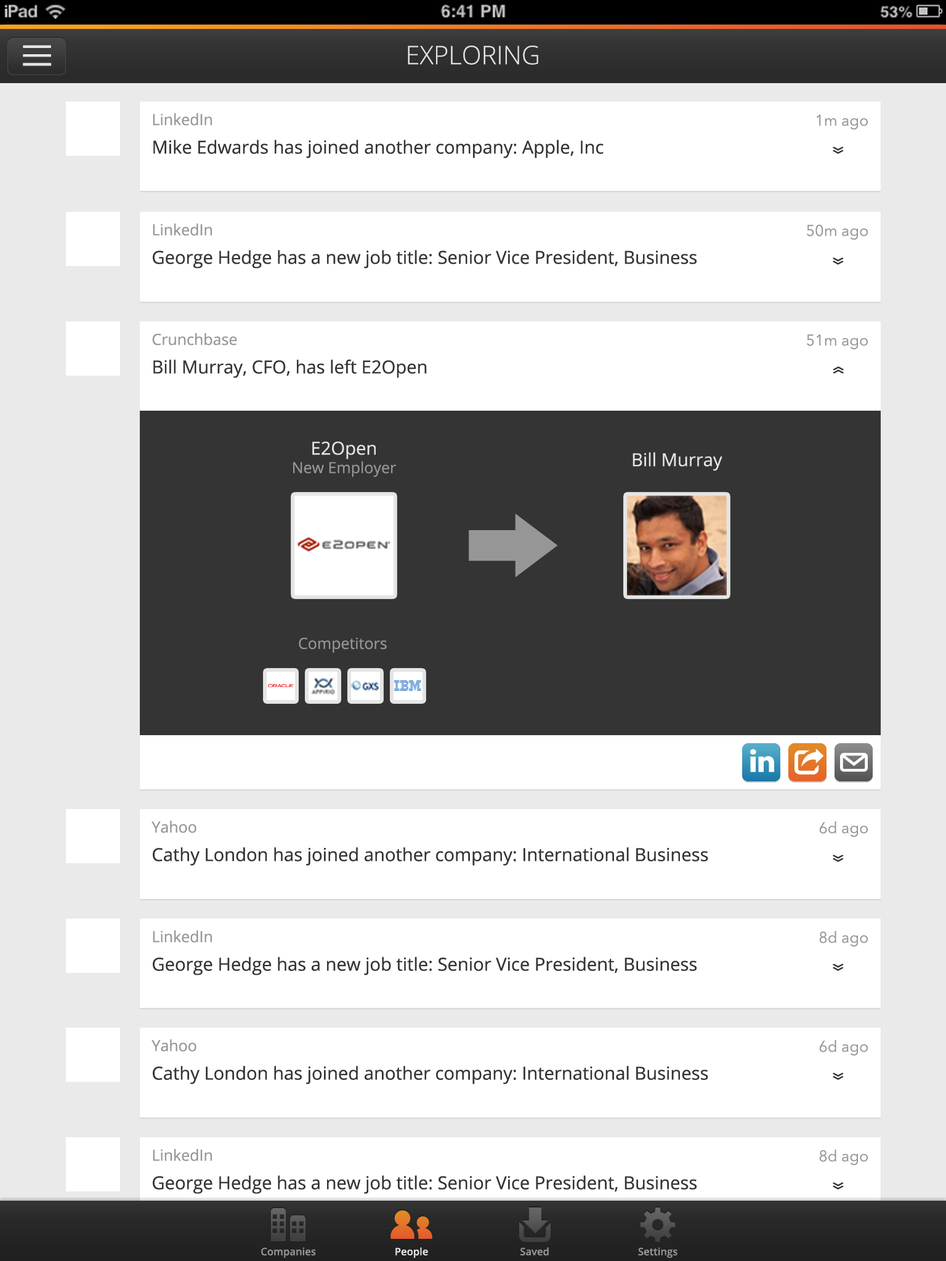
<style>
.page{position:relative;width:946px;height:1261px;background:#ffffff}
.page>*{position:absolute;margin:0}
.t1{font:25.7px "OpenSans-Light";color:#e5e5e5}
.t2{font:18px "OpenSans";color:#343434}
.t3{font:15.4px "OpenSans";color:#969696}
.t4{font:15.4px "AvenirNext-Regular";color:#969696}
.t5{font:25.7px "OpenSans";color:#343434;scale:0.64 1}
.t6{font:18px "OpenSans";color:#e5e5e5}
.t7{font:10.3px "OpenSans-Semibold";color:#969696}
.t8{font:10.3px "OpenSans-Semibold";color:#e5e5e5}
</style>
<div class="page">
<p class="t1" style="left:408px;top:46px;width:130px;height:19px">EXPLORING</p>
<p class="t2" style="left:153px;top:113px;width:450px;height:45px"><span class="t3">LinkedIn<br></span>Mike Edwards has joined another company: Apple, Inc</p>
<p class="t4" style="left:816px;top:115px;width:51px;height:15px">1m ago</p>
<p class="t5" style="left:832px;top:147px;width:11px;height:7px;rotate:90deg">»</p>
<p class="t2" style="left:153px;top:223px;width:543px;height:45px"><span class="t3">LinkedIn<br></span>George Hedge has a new job title: Senior Vice President, Business Development</p>
<p class="t4" style="left:807px;top:224px;width:60px;height:16px">50m ago</p>
<p class="t5" style="left:832px;top:257px;width:11px;height:8px;rotate:90deg">»</p>
<p class="t2" style="left:152px;top:333px;width:275px;height:45px"><span class="t3">Crunchbase<br></span>Bill Murray, CFO, has left E2Open</p>
<p class="t4" style="left:807px;top:334px;width:60px;height:16px">51m ago</p>
<p class="t5" style="left:832px;top:366px;width:11px;height:8px;rotate:-90deg">»</p>
<p class="t3" style="left:293px;top:441px;width:103px;height:36px;text-align:center"><span class="t6">E2Open<br></span>New Employer</p>
<p class="t6" style="left:632px;top:452px;width:90px;height:19px">Bill Murray</p>
<p class="t3" style="left:299px;top:637px;width:88px;height:16px">Competitors</p>
<p class="t2" style="left:151px;top:821px;width:557px;height:45px"><span class="t3">Yahoo<br></span>Cathy London has joined another company: International Business Machines</p>
<p class="t4" style="left:819px;top:821px;width:48px;height:16px">6d ago</p>
<p class="t5" style="left:832px;top:855px;width:11px;height:7px;rotate:90deg">»</p>
<p class="t2" style="left:153px;top:930px;width:543px;height:45px"><span class="t3">LinkedIn<br></span>George Hedge has a new job title: Senior Vice President, Business</p>
<p class="t4" style="left:819px;top:931px;width:48px;height:16px">8d ago</p>
<p class="t5" style="left:832px;top:964px;width:11px;height:7px;rotate:90deg">»</p>
<p class="t2" style="left:151px;top:1039px;width:557px;height:45px"><span class="t3">Yahoo<br></span>Cathy London has joined another company: International Business Machines</p>
<p class="t4" style="left:819px;top:1040px;width:48px;height:16px">6d ago</p>
<p class="t5" style="left:832px;top:1073px;width:11px;height:7px;rotate:90deg">»</p>
<p class="t2" style="left:153px;top:1149px;width:543px;height:45px"><span class="t3">LinkedIn<br></span>George Hedge has a new job title: Senior Vice President, Business</p>
<p class="t4" style="left:819px;top:1149px;width:48px;height:16px">8d ago</p>
<p class="t5" style="left:832px;top:1182px;width:11px;height:7px;rotate:90deg">»</p>
<p class="t7" style="left:261px;top:1247px;width:55px;height:11px">Companies</p>
<p class="t8" style="left:395px;top:1247px;width:33px;height:11px">People</p>
<p class="t7" style="left:520px;top:1247px;width:29px;height:8px">Saved</p>
<p class="t7" style="left:638px;top:1247px;width:39px;height:11px">Settings</p>
</div>
